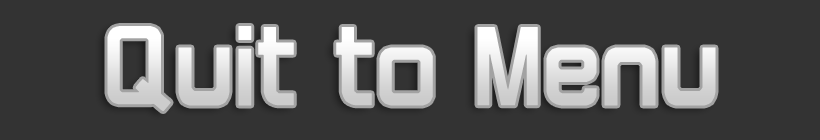
<style>
.page{position:relative;width:820px;height:140px;background:#333333}
.page>*{position:absolute;margin:0}
.t1{font:96px "Maximilien";font-weight:bold}
</style>
<div class="page">
<p class="t1" style="left:107px;top:26px;width:609px;height:85px">Quit to Menu</p>
</div>
